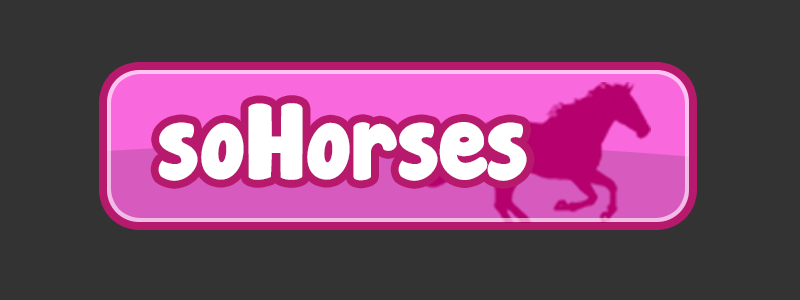
<style>
.page{position:relative;width:800px;height:300px;background:#333333}
.page>*{position:absolute;margin:0}
.t1{font:96px "JandaManateeSolid";color:#ffffff}
</style>
<div class="page">
<p class="t1" style="left:158px;top:103px;width:369px;height:78px">soHorses</p>
</div>
